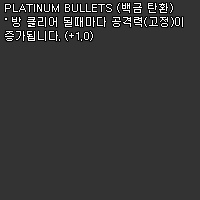
<style>
.page{position:relative;width:200px;height:200px;background:#333333}
.page>*{position:absolute;margin:0}
.t1{font:11px/14px "Dotum";color:#ffffff}
</style>
<div class="page">
<p class="t1" style="left:5px;top:3px;width:178px;height:38px">PLATINUM BULLETS (백금 탄환)<br>˚ 방 클리어 될때마다 공격력(고정)이 <br>증가됩니다. (+1.0)</p>
</div>
